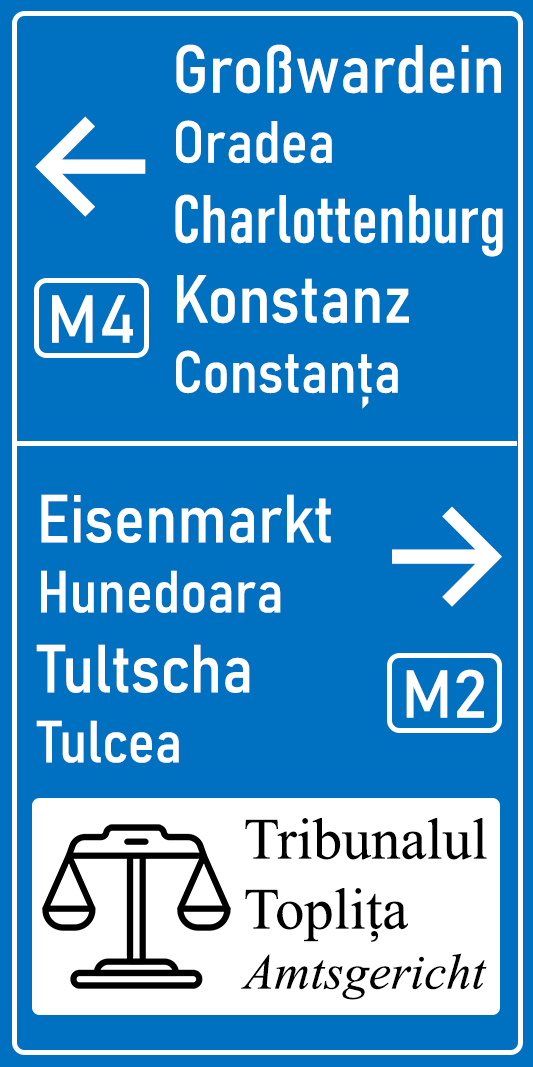
<style>
.page{position:relative;width:533px;height:1067px;background:#0070c0}
.page>*{position:absolute;margin:0}
.t1{font:66.7px "Bahnschrift-Condensed";color:#ffffff}
.t2{font:66.7px "Bahnschrift-SemiCondensed";color:#ffffff}
.t3{font:58.3px "Bahnschrift-SemiCondensed";color:#ffffff}
.t4{font:150px "Inter-Medium";color:#ffffff}
.t5{font:66.7px "Bahnschrift";color:#ffffff}
.t6{font:150px "InterV-Medium";color:#ffffff}
.t7{font:58.3px "TimesNewRomanPSMT";color:#000000}
.t8{font:50px "TimesNewRomanPS-ItalicMT";color:#000000}
</style>
<div class="page">
<p class="t1" style="left:175px;top:44px;width:328px;height:365px"><span class="t2">Großwardein<br></span><span class="t3">Oradea<br></span>Charlottenburg<br><span class="t2">Konstanz<br></span><span class="t3">Constanța</span></p>
<p class="t4" style="left:35px;top:116px;width:111px;height:101px">←</p>
<p class="t5" style="left:52px;top:295px;width:81px;height:48px">M4</p>
<p class="t2" style="left:36px;top:494px;width:295px;height:269px">Eisenmarkt<br><span class="t3">Hunedoara<br></span>Tultscha<br><span class="t3">Tulcea</span></p>
<p class="t6" style="left:392px;top:506px;width:110px;height:101px">→</p>
<p class="t5" style="left:406px;top:669px;width:78px;height:49px">M2</p>
<p class="t7" style="left:241px;top:818px;width:246px;height:182px">Tribunalul<br>Toplița<br><span class="t8">Amtsgericht</span></p>
</div>
